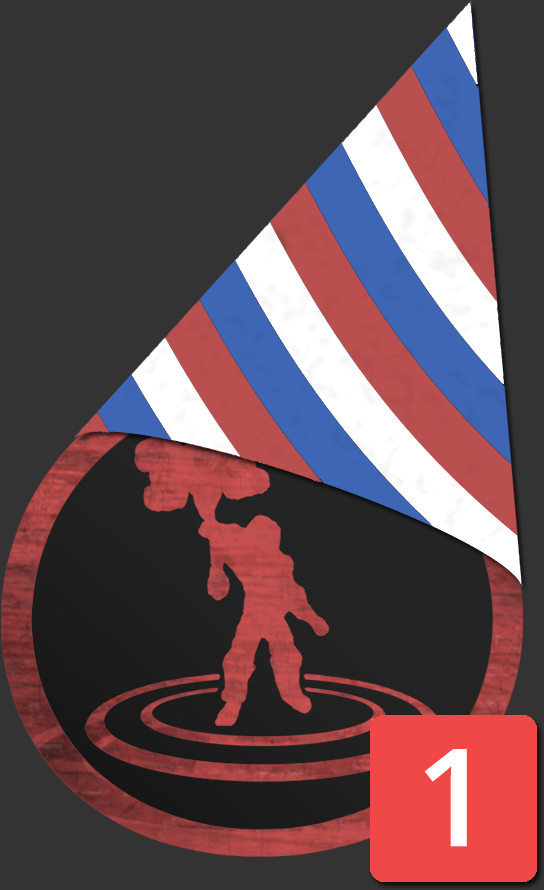
<style>
.page{position:relative;width:544px;height:890px;background:#333333}
.page>*{position:absolute;margin:0}
.t1{font:136px "OpenSans-Semibold";letter-spacing:0.25em;color:#ffffff;font-variant:small-caps}
</style>
<div class="page">
<p class="t1" style="left:424px;top:749px;width:43px;height:98px">1</p>
</div>
